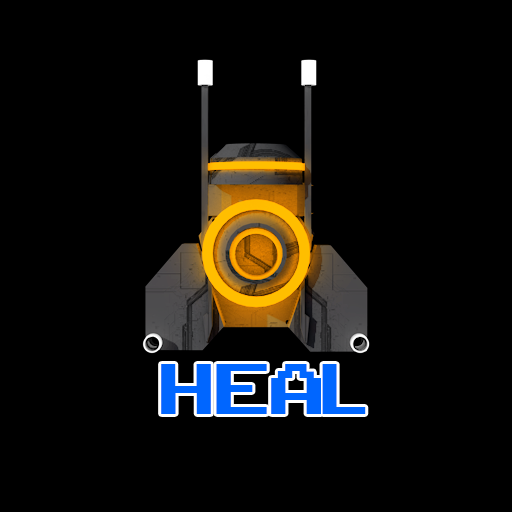
<style>
.page{position:relative;width:512px;height:512px;background:#000000}
.page>*{position:absolute;margin:0}
.t1{font:100px "ArcadeClassic";color:#0066ff}
</style>
<div class="page">
<p class="t1" style="left:161px;top:364px;width:205px;height:50px">Heal</p>
</div>
